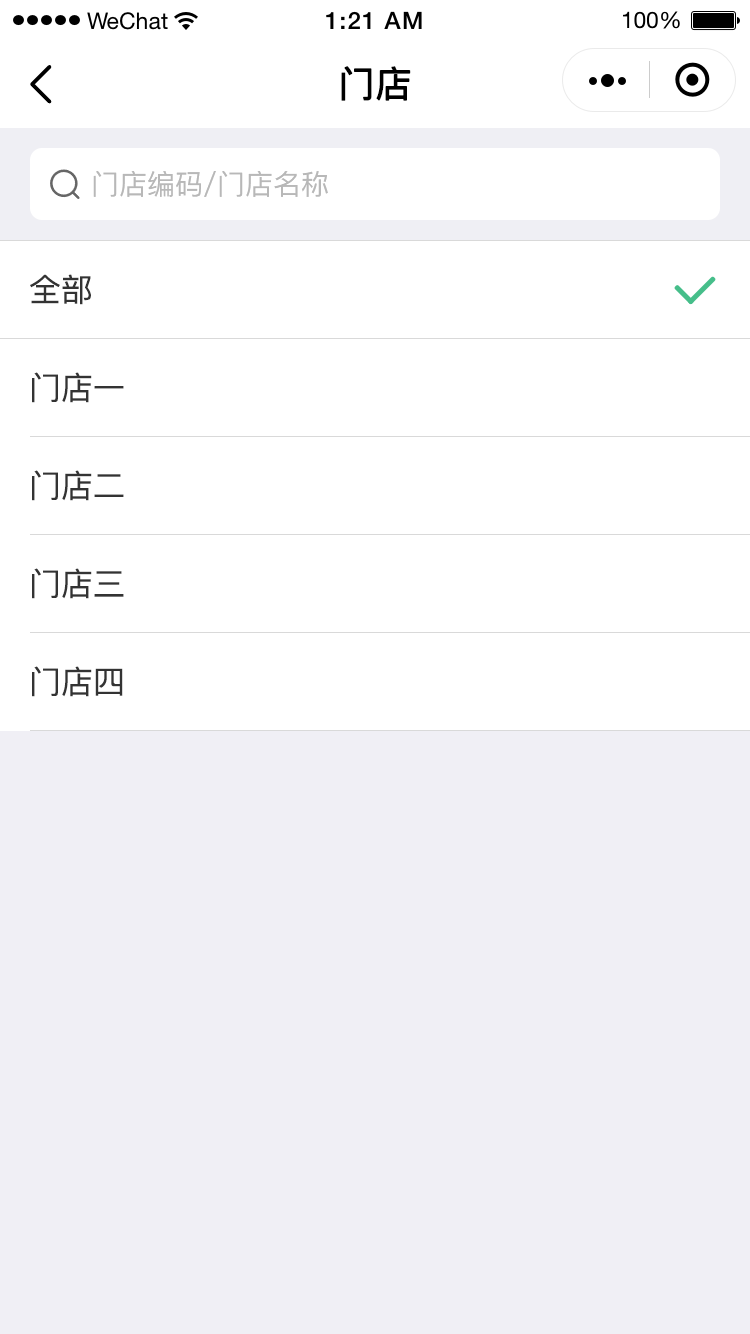
<style>
.page{position:relative;width:750px;height:1334px;background:#ffffff}
.page>*{position:absolute;margin:0}
.t1{font:36px "PingFang-SC-Medium";color:#000000;font-weight:bold}
.t2{font:28px "PingFang-SC-Medium";color:#b8b8b8}
.t3{font:32px "PingFang-SC-Medium";color:#333333}
</style>
<div class="page">
<p class="t1" style="left:341px;top:66px;width:70px;height:35px">门店</p>
<p class="t2" style="left:93px;top:171px;width:235px;height:26px">门店编码/门店名称</p>
<p class="t3" style="left:30px;top:274px;width:61px;height:31px">全部</p>
<p class="t3" style="left:32px;top:372px;width:92px;height:31px">门店一</p>
<p class="t3" style="left:32px;top:470px;width:92px;height:31px">门店二</p>
<p class="t3" style="left:32px;top:568px;width:92px;height:31px">门店三</p>
<p class="t3" style="left:32px;top:666px;width:91px;height:31px">门店四</p>
</div>
